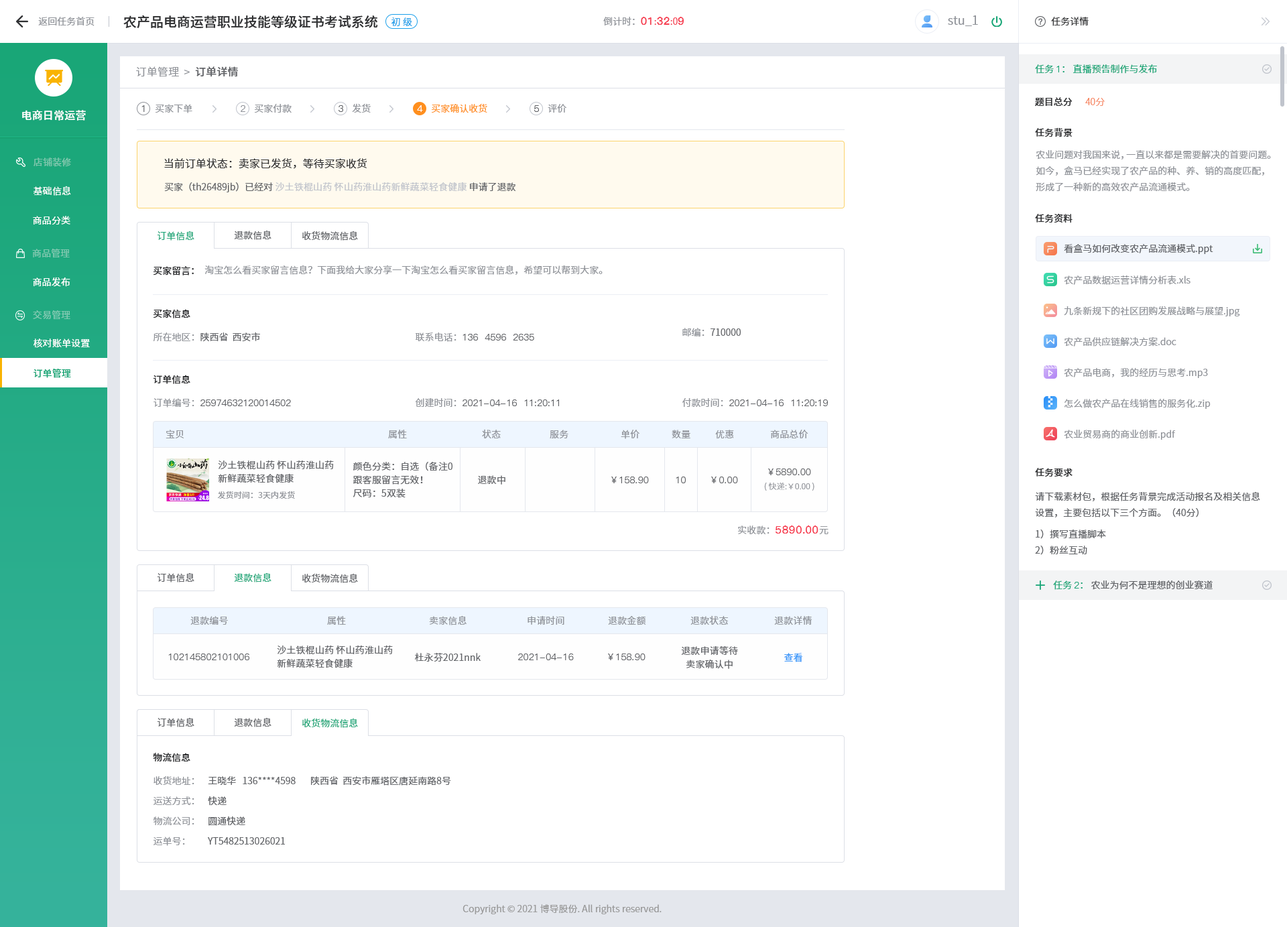
<style>
.page{position:relative;width:1287px;height:927px;background:#ffffff}
.page>*{position:absolute;margin:0}
.t1{font:9.4px "SourceHanSansCN-Normal";color:#909399}
.t2{font:13.4px "SourceHanSansCN-Medium";color:#303133}
.t3{font:9.4px "SourceHanSansCN-Normal";color:#1da0ea}
.t4{font:10.7px "PingFang-SC-Heavy";color:#f63f52}
.t5{font:9.4px "SourceHanSansCN-Normal";color:#f63f52}
.t6{font:12.1px "SourceHanSansCN-Normal";color:#909399}
.t7{font:9.4px "SourceHanSansCN-Normal";color:#303133}
.t8{font:9.4px "SourceHanSansCN-Normal";color:#19a677}
.t9{font:9.4px "PingFang-SC-Medium";color:#19a677}
.t10{font:10.7px "SourceHanSansCN-Normal";letter-spacing:0.01em;color:#909399}
.t11{font:10.7px "SourceHanSansCN-Medium";letter-spacing:0.01em;color:#606266}
.t12{font:9.4px "SourceHanSansCN-Medium";color:#303133}
.t13{font:9.4px "SourceHanSansCN-Light";color:#f67d53}
.t14{font:10.7px "SourceHanSansCN-Medium";letter-spacing:0.01em;color:#ffffff}
.t15{font:9.4px "PingFang-SC-Medium";color:#606266}
.t16{font:9.4px "PingFang-SC-Medium";color:#909399}
.t17{font:9.4px "PingFang-SC-Medium";color:#ffffff}
.t18{font:9.4px "SourceHanSansCN-Normal";color:#ff8f1e}
.t19{font:9.4px "SourceHanSansCN-Regular";letter-spacing:0.01em;color:#80c8af}
.t20{font:10.7px "SourceHanSansCN-Normal";color:#303133}
.t21{font:9.4px/16.1px "SourceHanSansCN-Normal";color:#909399}
.t22{font:9.4px "SourceHanSansCN-Normal";letter-spacing:0.01em;color:#ffffff}
.t23{font:9.4px "SourceHanSansCN-Normal";letter-spacing:0.01em;color:#c0c4cc}
.t24{font:9.4px "SourceHanSansCN-Normal";color:#606266}
.t25{font:9.4px "SourceHanSansSC-Normal";color:#1aa678}
.t26{font:9.4px "SourceHanSansSC-Normal";color:#606266}
.t27{font:9.4px "SourceHanSansCN-Regular";letter-spacing:0.01em;color:#81c9b1}
.t28{font:9.4px "SourceHanSansSC-Medium";color:#303133}
.t29{font:9.4px "SourceHanSansSC-Normal";color:#909399}
.t30{font:9.4px "SourceHanSansCN-Regular";letter-spacing:0.01em;color:#ffffff}
.t31{font:9.4px "SourceHanSansCN-Regular";letter-spacing:0.01em;color:#82cab3}
.t32{font:9.4px "SourceHanSansCN-Medium";letter-spacing:0.01em;color:#19a677}
.t33{font:9.4px "SourceHanSansCN-Normal";letter-spacing:0.01em;color:#909399}
.t34{font:9.4px/13.4px "SourceHanSansCN-Normal";letter-spacing:0.01em;color:#606266}
.t35{font:9.4px "PingFang-SC-Medium";letter-spacing:0.01em;color:#606266}
.t36{font:9.4px "SourceHanSansCN-Normal";letter-spacing:0.01em;color:#606266}
.t37{font:8px "SourceHanSansCN-Light";letter-spacing:0.01em;color:#909399}
.t38{font:8px "SourceHanSansCN-Normal";letter-spacing:0.01em;color:#909399}
.t39{font:9.4px/16.1px "SourceHanSansCN-Normal";color:#606266}
.t40{font:10.7px "PingFang-SC-Bold";letter-spacing:0.01em;color:#f63f52}
.t41{font:9.4px "SourceHanSansSC-Normal";color:#19a677}
.t42{font:9.4px "PingFang-SC-Medium";color:#1aa678}
.t43{font:9.4px "SourceHanSansCN-Normal";color:#1aa678}
.t44{font:9.4px "SourceHanSansCN-Normal";letter-spacing:0.01em;color:#3395fa}
.t45{font:9.4px/20.1px "SourceHanSansSC-Normal";color:#909399}
.t46{font:9.4px/20.1px "SourceHanSansSC-Normal";color:#606266}
.t47{font:9.4px "SourceHanSansCN-Normal";color:#999999}
</style>
<div class="page">
<p class="t1" style="left:38px;top:17px;width:56px;height:9px">返回任务首页</p>
<p class="t2" style="left:123px;top:15px;width:255px;height:13px">农产品电商运营职业技能等级证书考试系统</p>
<p class="t3" style="left:391px;top:17px;width:21px;height:10px">初 级</p>
<p class="t1" style="left:603px;top:17px;width:81px;height:9px">倒计时：<span class="t4">01</span><span class="t5">:</span><span class="t4">32</span><span class="t5">:0</span><span class="t4">9</span></p>
<p class="t6" style="left:948px;top:15px;width:30px;height:11px">stu_1</p>
<p class="t7" style="left:1051px;top:17px;width:37px;height:9px">任务详情</p>
<p class="t8" style="left:1035px;top:64px;width:122px;height:10px">任务 <span class="t9">1</span>： 直播预告制作与发布</p>
<p class="t10" style="left:136px;top:66px;width:102px;height:11px">订单管理  &gt;<span class="t11">  订单详情</span></p>
<p class="t12" style="left:1035px;top:97px;width:37px;height:10px">题目总分</p>
<p class="t13" style="left:1085px;top:98px;width:19px;height:8px">40分</p>
<p class="t14" style="left:22px;top:110px;width:64px;height:11px">电商日常运营</p>
<p class="t15" style="left:141px;top:105px;width:4px;height:7px">1</p>
<p class="t1" style="left:155px;top:104px;width:37px;height:9px">买家下单</p>
<p class="t16" style="left:241px;top:105px;width:4px;height:7px">2</p>
<p class="t1" style="left:254px;top:104px;width:38px;height:9px">买家付款</p>
<p class="t15" style="left:338px;top:105px;width:5px;height:7px">3</p>
<p class="t1" style="left:352px;top:103px;width:19px;height:10px">发货</p>
<p class="t17" style="left:417px;top:105px;width:6px;height:7px">4</p>
<p class="t18" style="left:431px;top:104px;width:56px;height:9px">买家确认收货</p>
<p class="t15" style="left:534px;top:105px;width:5px;height:7px">5</p>
<p class="t1" style="left:547px;top:104px;width:19px;height:9px">评价</p>
<p class="t12" style="left:1035px;top:127px;width:37px;height:10px">任务背景</p>
<p class="t19" style="left:34px;top:157px;width:37px;height:10px">店铺装修</p>
<p class="t20" style="left:164px;top:158px;width:203px;height:11px">当前订单状态：卖家已发货，等待买家收货</p>
<p class="t21" style="left:1035px;top:150px;width:236px;height:42px">农业问题对我国来说，一直以来都是需要解决的首要问题。如今，盒马已经实现了农产品的种、养、销的高度匹配，形成了一种新的高效农产品流通模式。</p>
<p class="t22" style="left:34px;top:186px;width:37px;height:10px">基础信息</p>
<p class="t23" style="left:164px;top:182px;width:352px;height:10px"><span class="t24">买家（th26489jb）已经对 </span>沙土铁棍山药 怀山药淮山药新鲜蔬菜轻食健康<span class="t24"> 申请了退款</span></p>
<p class="t22" style="left:33px;top:216px;width:37px;height:8px">商品分类</p>
<p class="t12" style="left:1035px;top:213px;width:37px;height:10px">任务资料</p>
<p class="t25" style="left:157px;top:231px;width:37px;height:10px">订单信息</p>
<p class="t26" style="left:234px;top:230px;width:37px;height:10px">退款信息</p>
<p class="t26" style="left:302px;top:231px;width:56px;height:10px">收货物流信息</p>
<p class="t24" style="left:1063px;top:244px;width:150px;height:10px">看盒马如何改变农产品流通模式.ppt</p>
<p class="t27" style="left:32px;top:249px;width:38px;height:9px">商品管理</p>
<p class="t28" style="left:153px;top:266px;width:41px;height:9px">买家留言：</p>
<p class="t29" style="left:204px;top:265px;width:398px;height:10px">淘宝怎么看买家留言信息？下面我给大家分享一下淘宝怎么看买家留言信息，希望可以帮到大家。</p>
<p class="t30" style="left:33px;top:277px;width:37px;height:10px">商品发布</p>
<p class="t1" style="left:1063px;top:275px;width:127px;height:10px">农产品数据运营详情分析表.xls</p>
<p class="t1" style="left:1063px;top:306px;width:177px;height:10px">九条新规下的社区团购发展战略与展望.jpg</p>
<p class="t31" style="left:33px;top:310px;width:37px;height:10px">交易管理</p>
<p class="t28" style="left:153px;top:309px;width:37px;height:9px">买家信息</p>
<p class="t26" style="left:682px;top:328px;width:58px;height:8px"><span class="t29">邮编：</span>710000</p>
<p class="t22" style="left:34px;top:338px;width:56px;height:10px">核对账单设置</p>
<p class="t26" style="left:153px;top:332px;width:107px;height:10px"><span class="t29">所在地区：</span>陕西省  西安市</p>
<p class="t15" style="left:415px;top:332px;width:119px;height:10px"><span class="t29">联系电话：</span>136  4596  2635</p>
<p class="t1" style="left:1063px;top:337px;width:113px;height:9px">农产品供应链解决方案.doc</p>
<p class="t32" style="left:34px;top:368px;width:37px;height:10px">订单管理</p>
<p class="t28" style="left:153px;top:375px;width:37px;height:9px">订单信息</p>
<p class="t1" style="left:1063px;top:368px;width:145px;height:10px">农产品电商，我的经历与思考.mp3</p>
<p class="t15" style="left:153px;top:398px;width:138px;height:9px"><span class="t29">订单编号：</span>25974632120014502</p>
<p class="t15" style="left:415px;top:398px;width:144px;height:9px"><span class="t29">创建时间：</span>2021-04-16  11:20:11</p>
<p class="t15" style="left:682px;top:398px;width:146px;height:9px"><span class="t29">付款时间：</span>2021-04-16  11:20:19</p>
<p class="t1" style="left:1064px;top:399px;width:146px;height:10px">怎么做农产品在线销售的服务化.zip</p>
<p class="t33" style="left:166px;top:430px;width:18px;height:8px">宝贝</p>
<p class="t33" style="left:388px;top:430px;width:19px;height:9px">属性</p>
<p class="t33" style="left:482px;top:429px;width:19px;height:9px">状态</p>
<p class="t33" style="left:550px;top:430px;width:18px;height:8px">服务</p>
<p class="t33" style="left:621px;top:430px;width:18px;height:9px">单价</p>
<p class="t33" style="left:671px;top:430px;width:19px;height:8px">数量</p>
<p class="t33" style="left:715px;top:430px;width:19px;height:9px">优惠</p>
<p class="t33" style="left:770px;top:430px;width:38px;height:8px">商品总价</p>
<p class="t1" style="left:1063px;top:430px;width:112px;height:10px">农业贸易商的商业创新.pdf</p>
<p class="t34" style="left:218px;top:460px;width:116px;height:23px">沙土铁棍山药 怀山药淮山药新鲜蔬菜轻食健康</p>
<p class="t34" style="left:352px;top:462px;width:100px;height:36px">颜色分类：自选（备注0<br>跟客服留言无效！<br>尺码：5双装</p>
<p class="t35" style="left:768px;top:468px;width:43px;height:7px">￥5890.00</p>
<p class="t12" style="left:1035px;top:468px;width:37px;height:9px">任务要求</p>
<p class="t36" style="left:478px;top:475px;width:27px;height:9px">退款中</p>
<p class="t35" style="left:611px;top:476px;width:38px;height:7px">￥158.90</p>
<p class="t35" style="left:675px;top:476px;width:11px;height:7px">10</p>
<p class="t35" style="left:711px;top:476px;width:27px;height:7px">￥0.00</p>
<p class="t37" style="left:764px;top:482px;width:50px;height:9px">( 快递:￥0.00 )</p>
<p class="t38" style="left:217px;top:491px;width:78px;height:8px">发货时间：3天内发货</p>
<p class="t39" style="left:1035px;top:491px;width:225px;height:64px">请下载素材包，根据任务背景完成活动报名及相关信息设置，主要包括以下三个方面。（40分）<br>1）撰写直播脚本<br>2）粉丝互动</p>
<p class="t40" style="left:738px;top:525px;width:90px;height:9px"><span class="t33">实收款：</span>5890.00<span class="t33">元</span></p>
<p class="t26" style="left:157px;top:572px;width:37px;height:10px">订单信息</p>
<p class="t41" style="left:234px;top:572px;width:37px;height:10px">退款信息</p>
<p class="t26" style="left:302px;top:573px;width:56px;height:10px">收货物流信息</p>
<p class="t24" style="left:1053px;top:580px;width:159px;height:10px"><span class="t8">任务 </span><span class="t42">2</span><span class="t43">：</span> 农业为何不是理想的创业赛道</p>
<p class="t33" style="left:190px;top:616px;width:38px;height:9px">退款编号</p>
<p class="t33" style="left:327px;top:616px;width:19px;height:9px">属性</p>
<p class="t33" style="left:429px;top:615px;width:37px;height:10px">卖家信息</p>
<p class="t33" style="left:527px;top:616px;width:37px;height:9px">申请时间</p>
<p class="t33" style="left:608px;top:615px;width:38px;height:10px">退款金额</p>
<p class="t33" style="left:690px;top:615px;width:38px;height:10px">退款状态</p>
<p class="t33" style="left:774px;top:616px;width:38px;height:9px">退款详情</p>
<p class="t35" style="left:168px;top:653px;width:81px;height:7px">102145802101006</p>
<p class="t34" style="left:277px;top:645px;width:116px;height:23px">沙土铁棍山药 怀山药淮山药新鲜蔬菜轻食健康</p>
<p class="t36" style="left:415px;top:653px;width:65px;height:8px">杜永芬2021nnk</p>
<p class="t35" style="left:518px;top:653px;width:56px;height:7px">2021-04-16</p>
<p class="t35" style="left:608px;top:653px;width:37px;height:7px">￥158.90</p>
<p class="t34" style="left:681px;top:646px;width:57px;height:23px;text-align:center">退款申请等待<br>卖家确认中</p>
<p class="t44" style="left:784px;top:653px;width:18px;height:9px">查看</p>
<p class="t26" style="left:157px;top:717px;width:37px;height:10px">订单信息</p>
<p class="t26" style="left:157px;top:717px;width:37px;height:10px">订单信息</p>
<p class="t26" style="left:234px;top:717px;width:37px;height:10px">退款信息</p>
<p class="t41" style="left:302px;top:718px;width:56px;height:10px">收货物流信息</p>
<p class="t28" style="left:153px;top:753px;width:37px;height:9px">物流信息</p>
<p class="t45" style="left:153px;top:776px;width:41px;height:70px">收货地址：<br>运送方式：<br>物流公司：<br>运单号：</p>
<p class="t46" style="left:208px;top:775px;width:243px;height:69px">王晓华   136****4598       陕西省  西安市雁塔区唐延南路8号<br>快递<br>圆通快递<br>YT5482513026021</p>
<p class="t47" style="left:462px;top:904px;width:199px;height:10px">Copyright © 2021 博导股份. All rights reserved.</p>
</div>
